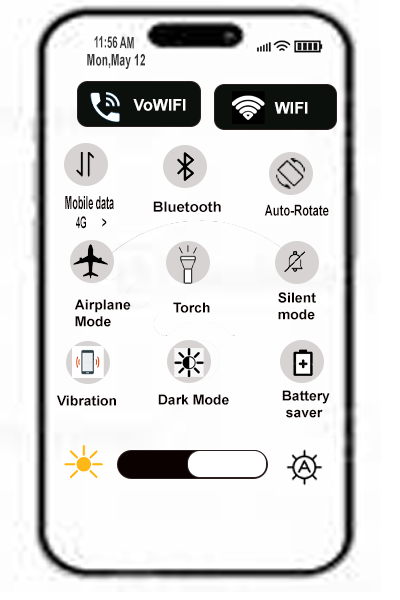
<style>
.page{position:relative;width:400px;height:600px;background:#fefefe}
.page>*{position:absolute;margin:0}
.t1{font:16px "Arial-BoldMT";color:#353535;scale:0.59 1}
.t2{font:16px "Arial-BoldMT";color:#353535;scale:0.65 1}
.t3{font:16px "Arial-BoldMT";color:#ffffff}
.t4{font:18px "Arial-BoldMT";color:#0b0101;scale:0.5 1}
.t5{font:16px "Arial-BoldMT";color:#0b0101;scale:0.5 1}
.t6{font:14.3px "Arial-BoldMT";color:#0b0101;scale:1.03 1}
.t7{font:15.1px "Arial-BoldMT";color:#0b0101;scale:0.74 1}
.t8{font:14px "Arial-BoldMT";color:#0b0101}
</style>
<div class="page">
<p class="t1" style="left:94px;top:36px;width:40px;height:13px;rotate:1deg">11:56 AM</p>
<p class="t2" style="left:87px;top:54px;width:58px;height:15px">Mon,May 12</p>
<p class="t3" style="left:133px;top:99px;width:53px;height:12px">VoWIFI</p>
<p class="t3" style="left:274px;top:102px;width:34px;height:12px">WIFI</p>
<p class="t4" style="left:65px;top:196px;width:49px;height:33px">Mobile data<br><span class="t5">     4G       &gt;</span></p>
<p class="t6" style="left:153px;top:201px;width:68px;height:11px">Bluetooth</p>
<p class="t7" style="left:264px;top:204px;width:65px;height:12px">Auto-Rotate</p>
<p class="t8" style="left:278px;top:292px;width:38px;height:28px">Silent <br>mode</p>
<p class="t8" style="left:74px;top:299px;width:57px;height:28px">Airplane<br>Mode</p>
<p class="t8" style="left:173px;top:302px;width:37px;height:11px">Torch</p>
<p class="t8" style="left:282px;top:390px;width:48px;height:28px">Battery<br> saver</p>
<p class="t8" style="left:56px;top:395px;width:60px;height:11px">Vibration</p>
<p class="t8" style="left:158px;top:394px;width:71px;height:11px">Dark Mode</p>
</div>
